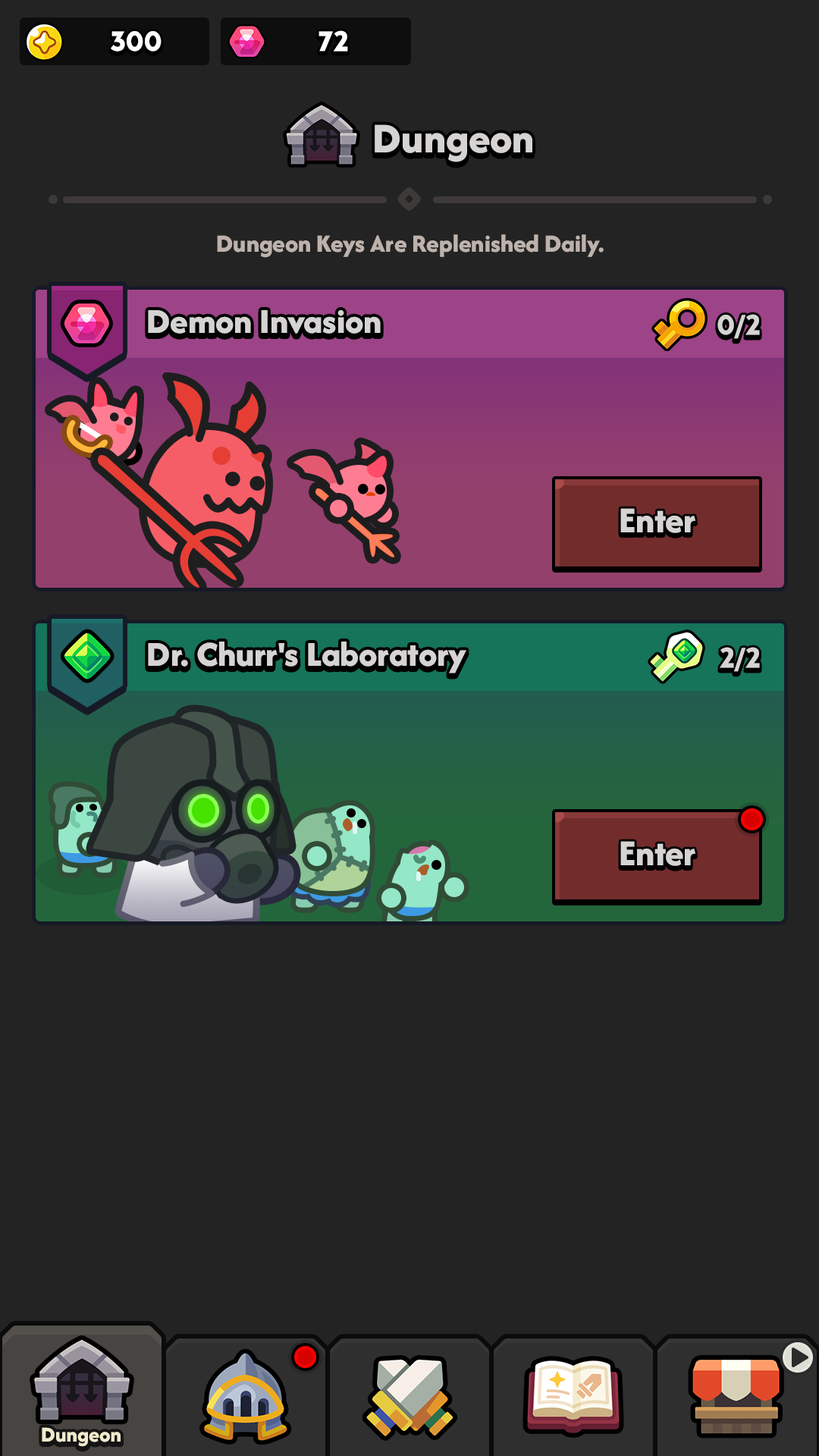
<style>
.page{position:relative;width:819px;height:1456px;background:#232323}
.page>*{position:absolute;margin:0}
.t1{font:29.6px "LTAvocado-Bold";color:#ffffff}
.t2{font:44px "AfacadFlux-ExtraBold";color:#d6d4d3}
.t3{font:25.8px "AfacadFlux-ExtraBold";color:#bdb2ac}
.t4{font:36.4px "AfacadFlux-ExtraBold";color:#d6d4d3}
.t5{font:29.6px "LTAvocado-Bold";color:#d6d4d3}
.t6{font:37.9px "AfacadFlux-ExtraBold";color:#d6d4d3}
.t7{font:22px "AfacadFlux-ExtraBold";color:#f1ebcc}
</style>
<div class="page">
<p class="t1" style="left:111px;top:31px;width:51px;height:21px">300</p>
<p class="t1" style="left:318px;top:30px;width:30px;height:22px">72</p>
<p class="t2" style="left:375px;top:124px;width:157px;height:38px">Dungeon</p>
<p class="t3" style="left:217px;top:234px;width:387px;height:24px">Dungeon Keys Are Replenished Daily.</p>
<p class="t4" style="left:148px;top:310px;width:233px;height:24px">Demon Invasion</p>
<p class="t5" style="left:717px;top:314px;width:43px;height:25px">0/2</p>
<p class="t6" style="left:620px;top:508px;width:75px;height:25px">Enter</p>
<p class="t4" style="left:148px;top:642px;width:318px;height:31px">Dr. Churr's Laboratory</p>
<p class="t5" style="left:720px;top:647px;width:40px;height:25px">2/2</p>
<p class="t6" style="left:620px;top:841px;width:75px;height:25px">Enter</p>
<p class="t7" style="left:42px;top:1427px;width:79px;height:20px">Dungeon</p>
</div>
